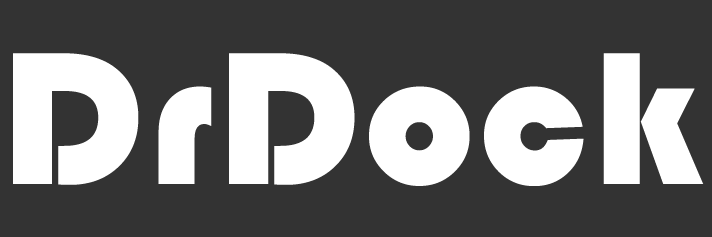
<style>
.page{position:relative;width:712px;height:237px;background:#333333}
.page>*{position:absolute;margin:0}
.t1{font:196px "Bauhaus93";letter-spacing:0.025em;color:#ffffff}
</style>
<div class="page">
<p class="t1" style="left:13px;top:53px;width:691px;height:133px">DrDock</p>
</div>
